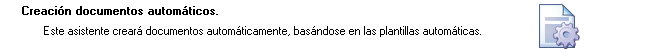
<style>
.page{position:relative;width:652px;height:52px;background:#ffffff}
.page>*{position:absolute;margin:0}
.t1{font:11.4px "MS Sans Serif";color:#000000;font-weight:bold}
.t2{font:11.4px "MS Sans Serif";color:#000000}
</style>
<div class="page">
<p class="t1" style="left:22px;top:6px;width:196px;height:9px">Creación documentos automáticos.</p>
<p class="t2" style="left:44px;top:26px;width:437px;height:11px">Este asistente creará documentos automáticamente, basándose en las plantillas automáticas.</p>
</div>
